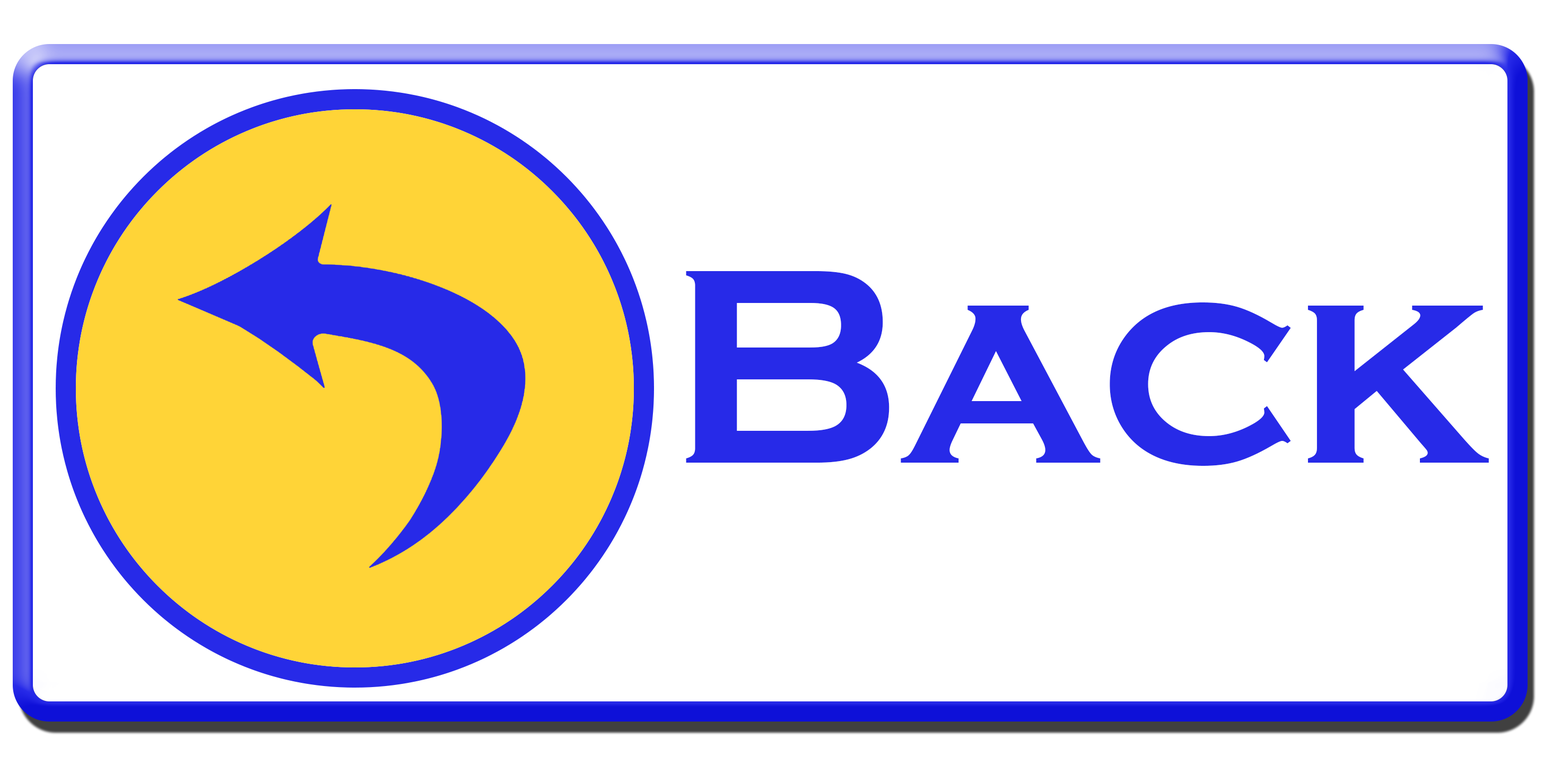
<style>
.page{position:relative;width:1561px;height:764px;background:#ffffff}
.page>*{position:absolute;margin:0}
.t1{font:287.3px "CopperplateGothic-Bold";color:#272ae8}
</style>
<div class="page">
<p class="t1" style="left:686px;top:271px;width:803px;height:195px">Back</p>
</div>
